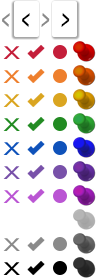
<style>
.page{position:relative;width:96px;height:280px;background:#ffffff}
.page>*{position:absolute;margin:0}
.t1{font:24px "Humanist521BT-Bold";color:#8a8a8a;font-style:italic;scale:0.5 1}
.t2{font:24px "Humanist521BT-Bold";color:#000000;font-style:italic;scale:0.5 1}
.t3{font:24px "OpenSans";color:#c41e3a;scale:1.4 1}
.t4{font:24px "OpenSans";color:#ee7f2d;scale:1.4 1}
.t5{font:24px "OpenSans";color:#daa520;scale:1.4 1}
.t6{font:24px "OpenSans";color:#228b22;scale:1.4 1}
.t7{font:24px "OpenSans";color:#0f52ba;scale:1.4 1}
.t8{font:24px "OpenSans";color:#7851a9;scale:1.4 1}
.t9{font:24px "OpenSans";color:#ba55d3;scale:1.4 1}
.t10{font:24px "OpenSans";color:#8a8a8a;scale:1.4 1}
.t11{font:24px "OpenSans";color:#000000;scale:1.4 1}
</style>
<div class="page">
<p class="t1" style="left:2px;top:13px;width:8px;height:14px">&lt;</p>
<p class="t2" style="left:22px;top:13px;width:8px;height:14px">&lt;</p>
<p class="t1" style="left:41px;top:13px;width:9px;height:14px">&gt;</p>
<p class="t2" style="left:61px;top:13px;width:9px;height:14px">&gt;</p>
<p class="t3" style="left:3px;top:46px;width:17px;height:13px">x</p>
<p class="t4" style="left:3px;top:70px;width:17px;height:13px">x</p>
<p class="t5" style="left:3px;top:94px;width:17px;height:13px">x</p>
<p class="t6" style="left:3px;top:118px;width:17px;height:13px">x</p>
<p class="t7" style="left:3px;top:142px;width:17px;height:13px">x</p>
<p class="t8" style="left:3px;top:166px;width:17px;height:13px">x</p>
<p class="t9" style="left:3px;top:190px;width:17px;height:13px">x</p>
<p class="t10" style="left:3px;top:238px;width:17px;height:13px">x</p>
<p class="t11" style="left:3px;top:262px;width:17px;height:13px">x</p>
</div>
